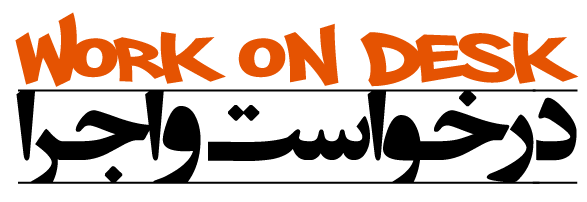
<style>
.page{position:relative;width:587px;height:202px;background:#ffffff}
.page>*{position:absolute;margin:0}
.t1{font:94.6px "PhillySans";color:#e55302}
.t2{font:125px "EntezareZohoor2";letter-spacing:0.01em;color:#000000}
</style>
<div class="page">
<p class="t1" style="left:15px;top:12px;width:564px;height:75px">Work on Desk</p>
<p class="t2" style="left:16px;top:89px;width:562px;height:95px">درخواست و  اجرا</p>
</div>
